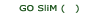
<style>
.page{position:relative;width:100px;height:16px;background:#ffffff}
.page>*{position:absolute;margin:0}
.t1{font:8px "Verdana";color:#235923;scale:1.2 1}
</style>
<div class="page">
<p class="t1" style="left:19px;top:4px;width:64px;height:9px">GO SliM (   )</p>
</div>
